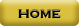
<style>
.page{position:relative;width:79px;height:26px}
.page>*{position:absolute;margin:0}
.t1{font:14px "CopperplateGothic-Bold";color:#000000}
</style>
<div class="page">
<p class="t1" style="left:18px;top:9px;width:43px;height:9px">Home</p>
</div>
